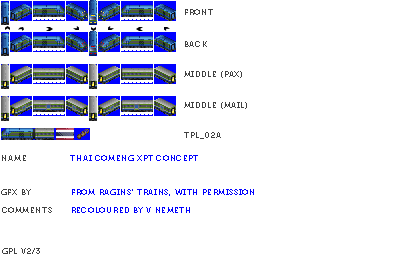
<style>
.page{position:relative;width:400px;height:270px;background:#ffffff}
.page>*{position:absolute;margin:0}
.t1{font:8px "Museo700-Regular";letter-spacing:0.075em;color:#404040;text-transform:uppercase}
.t2{font:8px "Museo700-Regular";letter-spacing:0.075em;color:#0000ff;text-transform:uppercase}
</style>
<div class="page">
<p class="t1" style="left:185px;top:9px;width:28px;height:6px">front</p>
<p class="t1" style="left:185px;top:41px;width:22px;height:6px">back</p>
<p class="t1" style="left:184px;top:71px;width:58px;height:7px">middle (pax)</p>
<p class="t1" style="left:184px;top:102px;width:63px;height:7px">middle (mail)</p>
<p class="t1" style="left:184px;top:132px;width:37px;height:7px">tpl_02a</p>
<p class="t1" style="left:2px;top:155px;width:24px;height:6px">name</p>
<p class="t2" style="left:70px;top:155px;width:128px;height:6px">Thai Comeng XPT Concept</p>
<p class="t1" style="left:1px;top:189px;width:30px;height:6px">gfx by</p>
<p class="t2" style="left:72px;top:189px;width:182px;height:7px">from ragins' trains, with permission</p>
<p class="t1" style="left:2px;top:207px;width:50px;height:6px">comments</p>
<p class="t2" style="left:72px;top:207px;width:118px;height:6px">recoloured by v nemeth</p>
<p class="t1" style="left:2px;top:248px;width:38px;height:6px">gpl v2/3</p>
</div>
